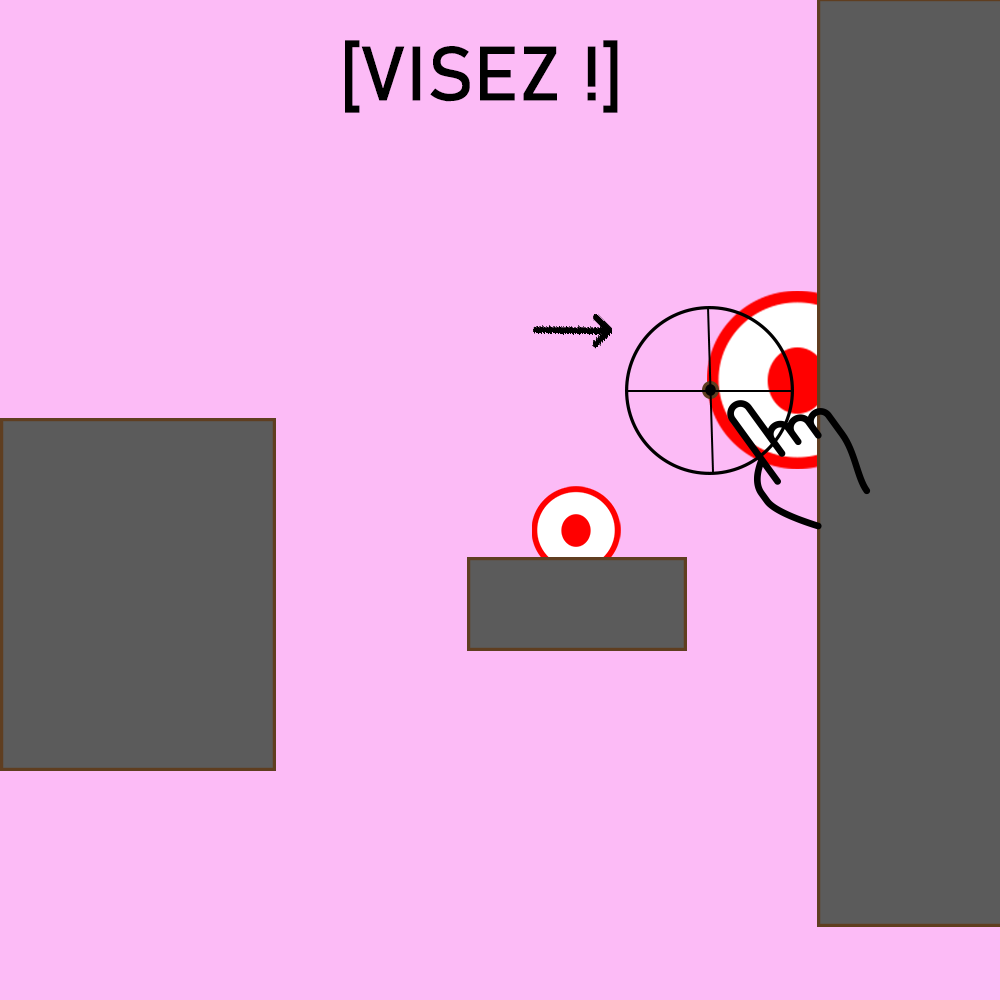
<style>
.page{position:relative;width:1000px;height:1000px;background:#fcbbf6}
.page>*{position:absolute;margin:0}
.t1{font:129.9px "Bahnschrift";letter-spacing:0.005em;color:#000000}
</style>
<div class="page">
<p class="t1" style="left:345px;top:40px;width:273px;height:73px">[VISEZ !]</p>
</div>
